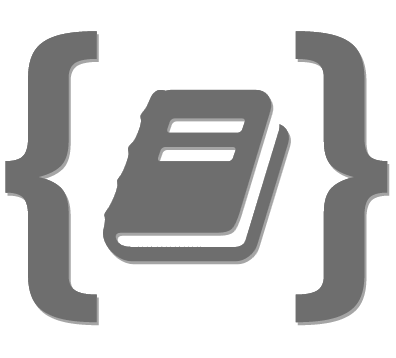
<style>
.page{position:relative;width:396px;height:358px;background:#ffffff}
.page>*{position:absolute;margin:0}
.t1{font:297.9px "FiraSans-Medium";letter-spacing:0.007em;color:#6e6e6e;scale:1.13 1}
</style>
<div class="page">
<p class="t1" style="left:5px;top:31px;width:383px;height:292px">{  }</p>
</div>
